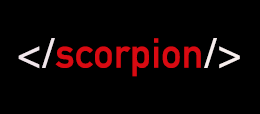
<style>
.page{position:relative;width:260px;height:114px;background:#000000}
.page>*{position:absolute;margin:0}
.t1{font:41.1px "DINAlternate-Bold";color:#d90a12}
.t2{font:41.1px "DINAlternate-Bold";color:#f1e6eb}
.t3{font:41.1px "DINAlternate-Bold";color:#f7eeed}
</style>
<div class="page">
<p class="t1" style="left:18px;top:38px;width:222px;height:39px"><span class="t2">&lt;/</span>scorpion<span class="t3">/&gt;</span></p>
</div>
